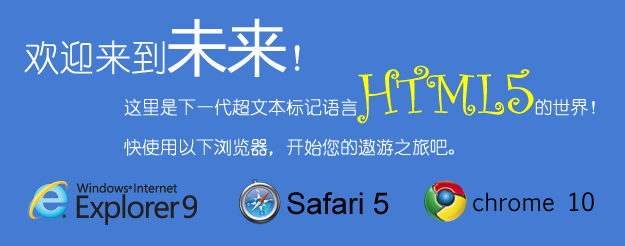
<style>
.page{position:relative;width:625px;height:246px;background:#447cd4}
.page>*{position:absolute;margin:0}
.t1{font:36px "YouYuan";color:#ffffff}
.t2{font:60px "MicrosoftYaHei";color:#ffffff}
.t3{font:18px "YouYuan";color:#ffffff}
.t4{font:60px "CurlzMT";color:#ffff00}
.t5{font:30px "ArialMT";color:#000000}
.t6{font:24px "EuphemiaCAS";color:#000000}
</style>
<div class="page">
<p class="t1" style="left:24px;top:18px;width:276px;height:59px">欢迎来到<span class="t2">未来</span>！</p>
<p class="t3" style="left:124px;top:65px;width:471px;height:59px">这里是下一代超文本标记语言<span class="t4">HTML5</span>的世界！</p>
<p class="t3" style="left:124px;top:138px;width:330px;height:19px">快使用以下浏览器，开始您的遨游之旅吧。</p>
<p class="t5" style="left:287px;top:192px;width:102px;height:23px">Safari 5</p>
<p class="t6" style="left:473px;top:192px;width:121px;height:20px">chrome 10</p>
</div>
